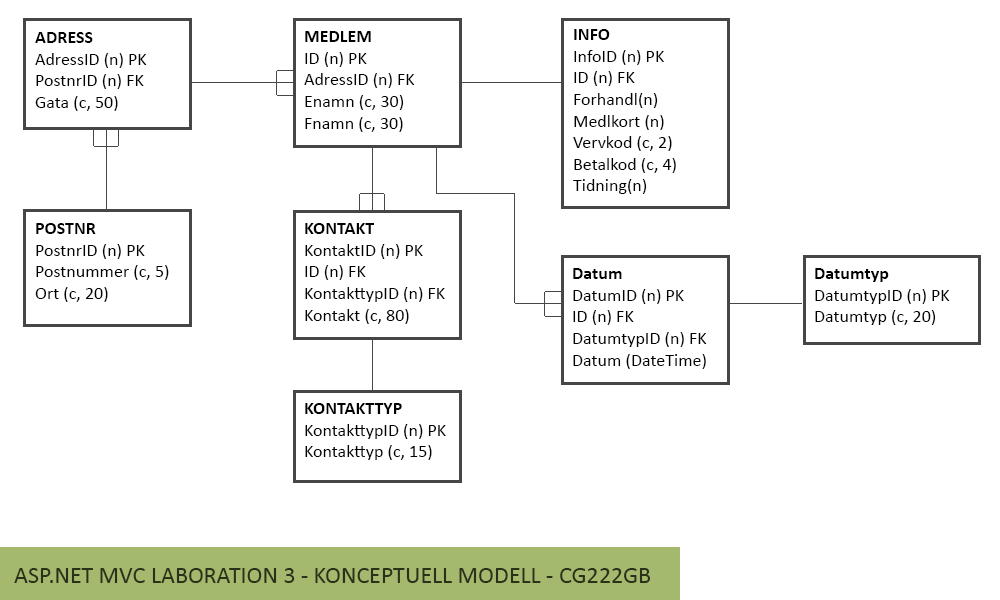
<style>
.page{position:relative;width:1000px;height:600px;background:#ffffff}
.page>*{position:absolute;margin:0}
.t1{font:18px "Calibri";color:#000000}
.t2{font:18px "Calibri-Bold";color:#000000}
.t3{font:24px "Calibri";color:#2a3119}
</style>
<div class="page">
<p class="t1" style="left:573px;top:29px;width:103px;height:165px"><span class="t2">INFO<br></span>InfoID (n) PK<br>ID (n) FK<br>Forhandl(n)<br>Medlkort (n)<br>Vervkod (c, 2)<br>Betalkod (c, 4)<br>Tidning(n)</p>
<p class="t1" style="left:35px;top:32px;width:112px;height:79px"><span class="t2">ADRESS<br></span>AdressID (n) PK<br>PostnrID (n) FK<br>Gata (c, 50)</p>
<p class="t1" style="left:304px;top:31px;width:111px;height:101px"><span class="t2">MEDLEM<br></span>ID (n) PK<br>AdressID (n) FK<br>Enamn (c, 30)<br>Fnamn (c, 30)</p>
<p class="t1" style="left:35px;top:223px;width:134px;height:79px"><span class="t2">POSTNR<br></span>PostnrID (n) PK<br>Postnummer (c, 5)<br>Ort (c, 20)</p>
<p class="t1" style="left:305px;top:223px;width:140px;height:101px"><span class="t2">KONTAKT<br></span>KontaktID (n) PK<br>ID (n) FK<br>KontakttypID (n) FK<br>Kontakt (c, 80)</p>
<p class="t1" style="left:573px;top:268px;width:134px;height:101px"><span class="t2">Datum<br></span>DatumID (n) PK<br>ID (n) FK<br>DatumtypID (n) FK<br>Datum (DateTime)</p>
<p class="t1" style="left:815px;top:268px;width:135px;height:57px"><span class="t2">Datumtyp<br></span>DatumtypID (n) PK<br>Datumtyp (c, 20)</p>
<p class="t1" style="left:305px;top:403px;width:141px;height:57px"><span class="t2">KONTAKTTYP<br></span>KontakttypID (n) PK<br>Kontakttyp (c, 15)</p>
<p class="t3" style="left:14px;top:568px;width:637px;height:15px">ASP.NET MVC LABORATION 3 - KONCEPTUELL MODELL - CG222GB</p>
</div>
